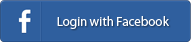
<style>
.page{position:relative;width:191px;height:42px;background:#2f5f9e}
.page>*{position:absolute;margin:0}
.t1{font:13px "MyriadPro-Regular";color:#ffffff}
</style>
<div class="page">
<p class="t1" style="left:57px;top:16px;width:112px;height:13px">Login with Facebook</p>
</div>
